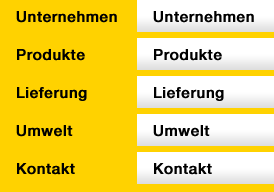
<style>
.page{position:relative;width:274px;height:192px;background:#ffd200}
.page>*{position:absolute;margin:0}
.t1{font:15px/38px "HelveticaNeue-Medium";letter-spacing:0.025em;color:#000000;font-weight:bold}
</style>
<div class="page">
<p class="t1" style="left:16px;top:11px;width:101px;height:164px">Unternehmen     <br>Produkte<br>Lieferung    <br>Umwelt<br>Kontakt</p>
<p class="t1" style="left:153px;top:11px;width:101px;height:164px">Unternehmen     <br>Produkte<br>Lieferung    <br>Umwelt<br>Kontakt</p>
</div>
